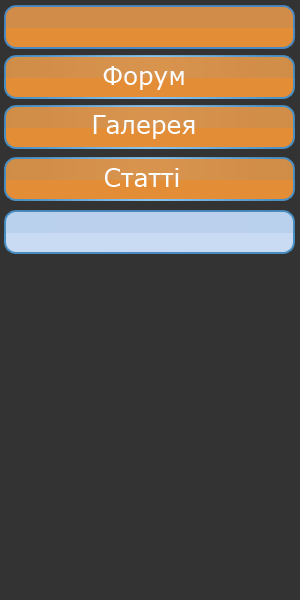
<style>
.page{position:relative;width:300px;height:600px;background:#333333}
.page>*{position:absolute;margin:0}
.t1{font:25px "Verdana";color:#fbfcfe}
</style>
<div class="page">
<p class="t1" style="left:103px;top:66px;width:81px;height:24px">Форум</p>
<p class="t1" style="left:93px;top:115px;width:102px;height:24px">Галерея</p>
<p class="t1" style="left:105px;top:168px;width:74px;height:19px">Статті</p>
</div>
